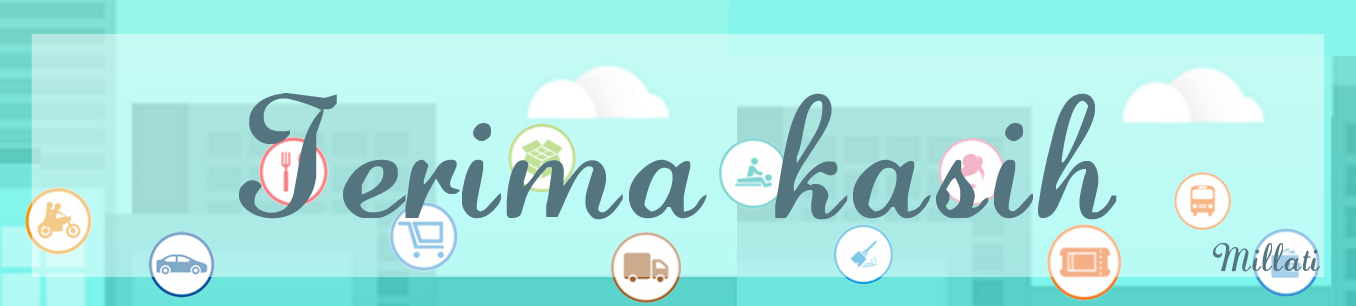
<style>
.page{position:relative;width:1356px;height:306px}
.page>*{position:absolute;margin:0}
.t1{font:125px "LaurenScript";letter-spacing:0.05em;color:#54757f}
.t2{font:28px "LaurenScript";letter-spacing:0.05em;color:#54757f}
</style>
<div class="page">
<p class="t1" style="left:239px;top:93px;width:878px;height:127px">Terima kasih</p>
<p class="t2" style="left:1213px;top:243px;width:107px;height:29px">__Millati</p>
</div>
